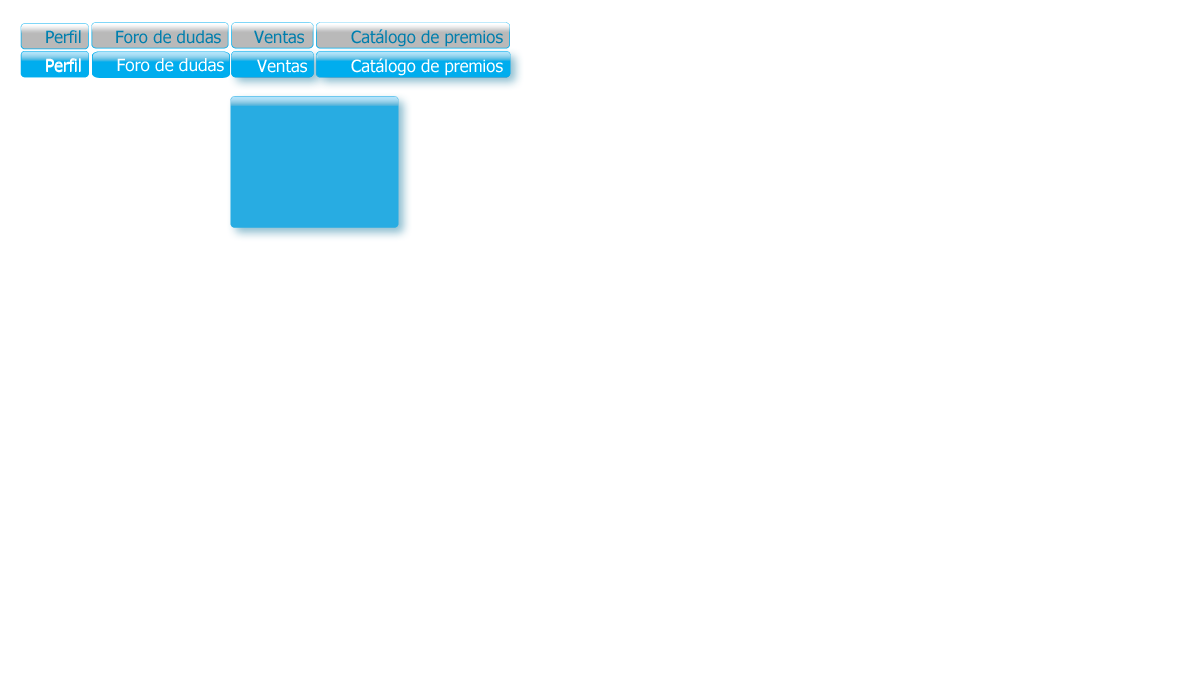
<style>
.page{position:relative;width:1200px;height:700px;background:#ffffff}
.page>*{position:absolute;margin:0}
.t1{font:16.8px "Tahoma";color:#007ead}
.t2{font:16.8px "Tahoma";color:#ffffff}
.t3{font:16.9px "Tahoma";color:#ffffff}
</style>
<div class="page">
<p class="t1" style="left:46px;top:30px;width:35px;height:14px">Perfil</p>
<p class="t1" style="left:116px;top:30px;width:105px;height:14px">Foro de dudas</p>
<p class="t1" style="left:254px;top:30px;width:50px;height:14px">Ventas</p>
<p class="t1" style="left:351px;top:29px;width:152px;height:18px">Catálogo de premios</p>
<p class="t2" style="left:46px;top:58px;width:35px;height:14px">Perfil</p>
<p class="t2" style="left:46px;top:59px;width:35px;height:14px">Perfil</p>
<p class="t3" style="left:117px;top:58px;width:107px;height:14px">Foro de dudas</p>
<p class="t2" style="left:257px;top:59px;width:50px;height:14px">Ventas</p>
<p class="t2" style="left:351px;top:58px;width:152px;height:18px">Catálogo de premios</p>
<p class="t2" style="left:351px;top:58px;width:152px;height:18px">Catálogo de premios</p>
</div>
